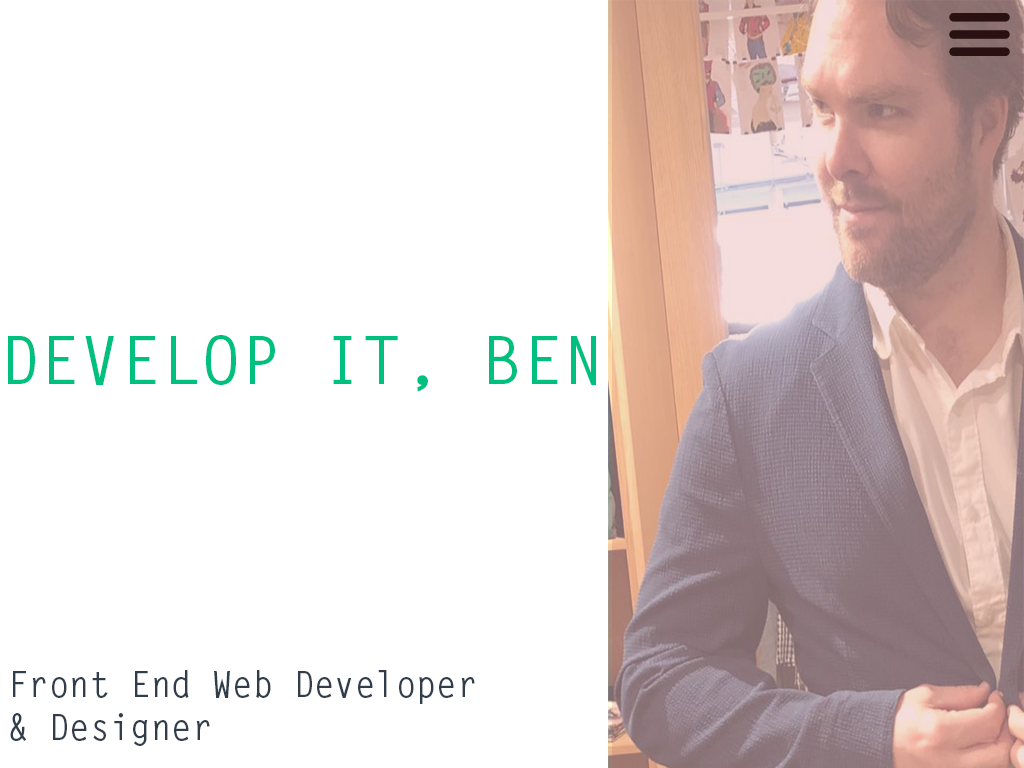
<style>
.page{position:relative;width:1024px;height:768px;background:#ffffff}
.page>*{position:absolute;margin:0}
.t1{font:67px "LetterGothicStd-Bold";color:#00c07f}
.t2{font:36px "LetterGothicStd-Bold";color:#313d4b;scale:0.94 1}
</style>
<div class="page">
<p class="t1" style="left:8px;top:335px;width:588px;height:57px">DEVELOP IT, BEN</p>
<p class="t2" style="left:10px;top:670px;width:465px;height:76px">Front End Web Developer<br>&amp; Designer</p>
</div>
